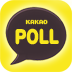
<style>
.page{position:relative;width:72px;height:72px}
.page>*{position:absolute;margin:0}
.t1{font:20.8px "HelveticaRounded-Black";letter-spacing:-0.05em;color:#f9e81e;scale:0.78 1}
.t2{font:20.8px "HelveticaRounded-Black";letter-spacing:-0.05em;color:#f9e81e;scale:0.76 1}
.t3{font:5.2px "Kroeger0666";letter-spacing:-0.11em;color:#f9e81e;scale:0.94 1}
</style>
<div class="page">
<p class="t1" style="left:15px;top:28px;width:44px;height:17px">P<span class="t2">O</span>LL</p>
<p class="t3" style="left:25px;top:19px;width:23px;height:6px">KAKAO</p>
</div>
